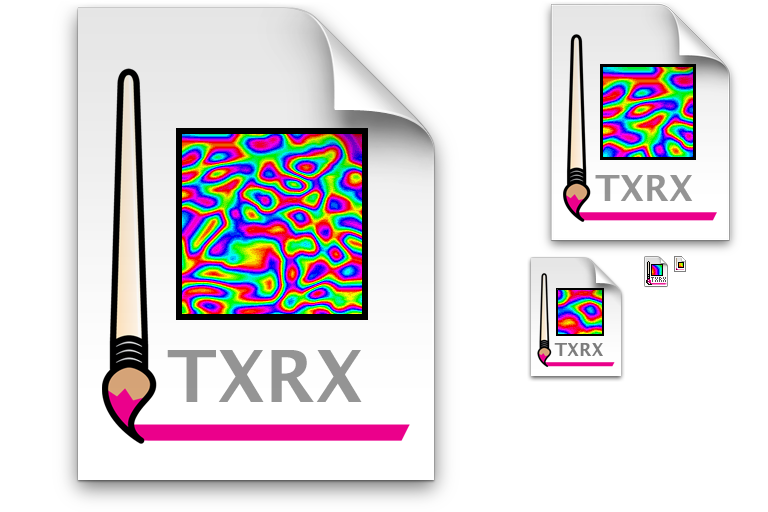
<style>
.page{position:relative;width:768px;height:512px;background:#ffffff}
.page>*{position:absolute;margin:0}
.t1{font:36px "LucidaGrande-Bold";color:#959595}
.t2{font:7px "KKFixed4x7";color:#555555}
.t3{font:72px "LucidaGrande-Bold";color:#959595}
.t4{font:18px "LucidaGrande-Bold";color:#7d7d7d}
</style>
<div class="page">
<p class="t1" style="left:595px;top:175px;width:98px;height:26px">TXRX</p>
<p class="t2" style="left:651px;top:277px;width:15px;height:5px">TXRX</p>
<p class="t3" style="left:167px;top:350px;width:195px;height:52px">TXRX</p>
<p class="t4" style="left:554px;top:343px;width:49px;height:13px">TXRX</p>
</div>
